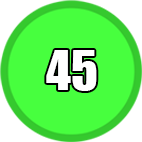
<style>
.page{position:relative;width:142px;height:142px;background:#47ff3e}
.page>*{position:absolute;margin:0}
.t1{font:50px "Impact";color:#ffffff}
</style>
<div class="page">
<p class="t1" style="left:46px;top:50px;width:51px;height:41px">45</p>
</div>
